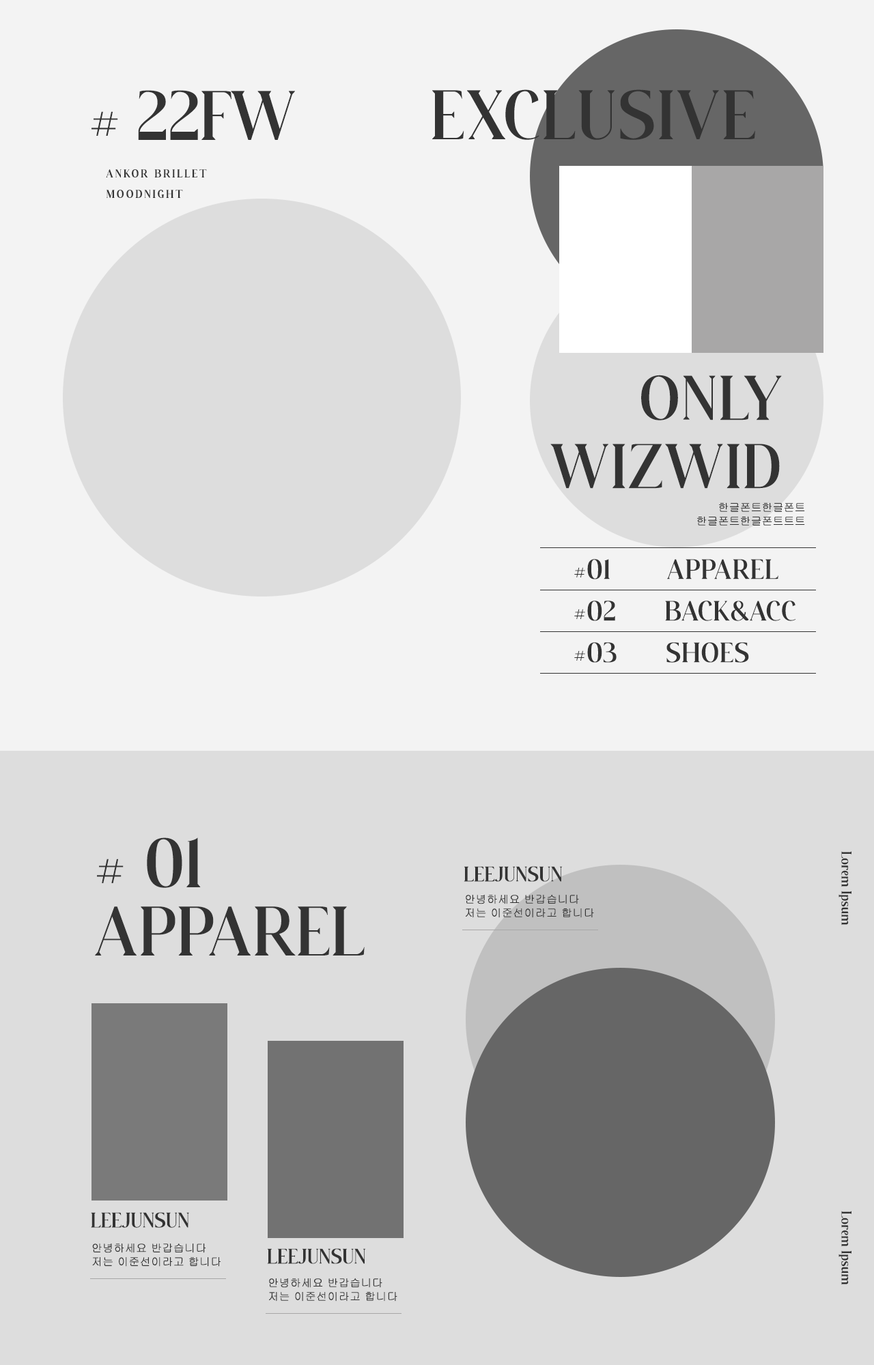
<style>
.page{position:relative;width:874px;height:1365px;background:#dddddd}
.page>*{position:absolute;margin:0}
.t1{font:68.2px "WalkesterRegular";letter-spacing:0.04em;color:#333333}
.t2{font:68.2px "WalkesterRegular";color:#333333}
.t3{font:10.9px/20.5px "WalkesterRegular";letter-spacing:0.2em;color:#333333}
.t4{font:61.4px/68.2px "WalkesterRegular";letter-spacing:0.04em;color:#333333}
.t5{font:10.9px/13.6px "Gulim";color:#333333}
.t6{font:27.3px "WalkesterRegular";letter-spacing:0.04em;color:#333333}
.t7{font:68.2px/68.2px "WalkesterRegular";letter-spacing:0.02em;color:#333333}
.t8{font:13.6px/0px "WalkesterRegular";letter-spacing:0.02em;color:#333333}
.t9{font:20.5px "WalkesterRegular";letter-spacing:0.02em;color:#333333}
.t10{font:10.9px/13.6px "Gulim";letter-spacing:0.02em;color:#333333}
</style>
<div class="page">
<p class="t1" style="left:432px;top:89px;width:323px;height:51px">EXCLUSIVE</p>
<p class="t2" style="left:91px;top:90px;width:204px;height:50px"># 22FW</p>
<p class="t3" style="left:106px;top:169px;width:101px;height:29px">ANKOR BRILLET<br>MOODNIGHT</p>
<p class="t4" style="left:550px;top:375px;width:231px;height:114px;text-align:right">ONLY<br>WIZWID</p>
<p class="t5" style="left:697px;top:502px;width:108px;height:24px;text-align:right">한글폰트한글폰트<br>한글폰트한글폰트트트</p>
<p class="t6" style="left:574px;top:559px;width:204px;height:20px">#01       APPAREL</p>
<p class="t6" style="left:574px;top:601px;width:222px;height:20px">#02      BACK&amp;ACC</p>
<p class="t6" style="left:574px;top:642px;width:175px;height:21px">#03      SHOES</p>
<p class="t7" style="left:95px;top:837px;width:269px;height:118px"># 01<br>APPAREL</p>
<p class="t8" style="left:838px;top:851px;width:13px;height:74px">Lorem Ipsum</p>
<p class="t9" style="left:463px;top:866px;width:99px;height:16px">LEEJUNSUN</p>
<p class="t10" style="left:465px;top:894px;width:129px;height:24px">안녕하세요 반갑습니다<br>저는 이준선이라고 합니다</p>
<p class="t9" style="left:91px;top:1212px;width:98px;height:16px">LEEJUNSUN</p>
<p class="t8" style="left:838px;top:1211px;width:13px;height:74px">Lorem Ipsum</p>
<p class="t10" style="left:92px;top:1243px;width:129px;height:24px">안녕하세요 반갑습니다<br>저는 이준선이라고 합니다</p>
<p class="t9" style="left:267px;top:1248px;width:99px;height:16px">LEEJUNSUN</p>
<p class="t10" style="left:269px;top:1278px;width:128px;height:24px">안녕하세요 반갑습니다<br>저는 이준선이라고 합니다</p>
</div>
